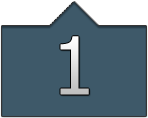
<style>
.page{position:relative;width:148px;height:118px;background:#3e5969}
.page>*{position:absolute;margin:0}
.t1{font:80px "Tahoma"}
</style>
<div class="page">
<p class="t1" style="left:60px;top:36px;width:29px;height:59px">1</p>
</div>
